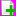
<style>
.page{position:relative;width:16px;height:16px}
.page>*{position:absolute;margin:0}
.t1{font:21px "Arial-BoldMT";color:#1ea911}
</style>
<div class="page">
<p class="t1" style="left:5px;top:5px;width:12px;height:11px">+</p>
</div>
